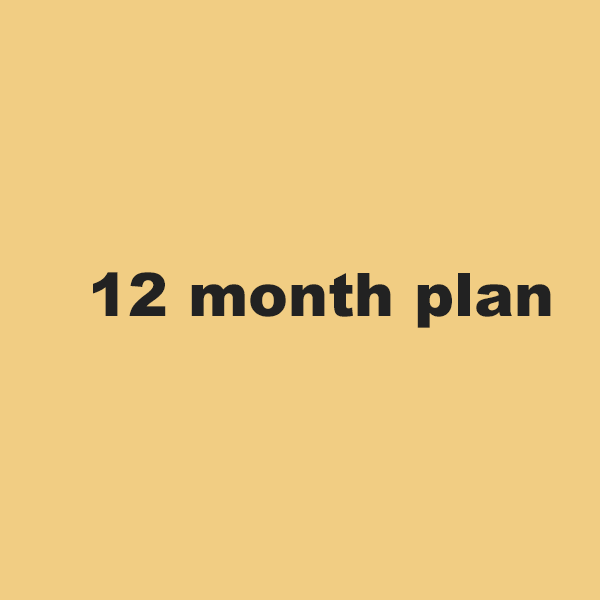
<style>
.page{position:relative;width:600px;height:600px;background:#f1cd83}
.page>*{position:absolute;margin:0}
.t1{font:60px "Arial-Black";color:#222222}
</style>
<div class="page">
<p class="t1" style="left:93px;top:272px;width:458px;height:56px">12 month plan</p>
</div>
